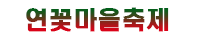
<style>
.page{position:relative;width:200px;height:40px;background:#ffffff}
.page>*{position:absolute;margin:0}
.t1{font:24px "H2hdrM";letter-spacing:-0.01em;font-weight:bold}
</style>
<div class="page">
<p class="t1" style="left:26px;top:7px;width:143px;height:25px">연꽃마을축제</p>
</div>
